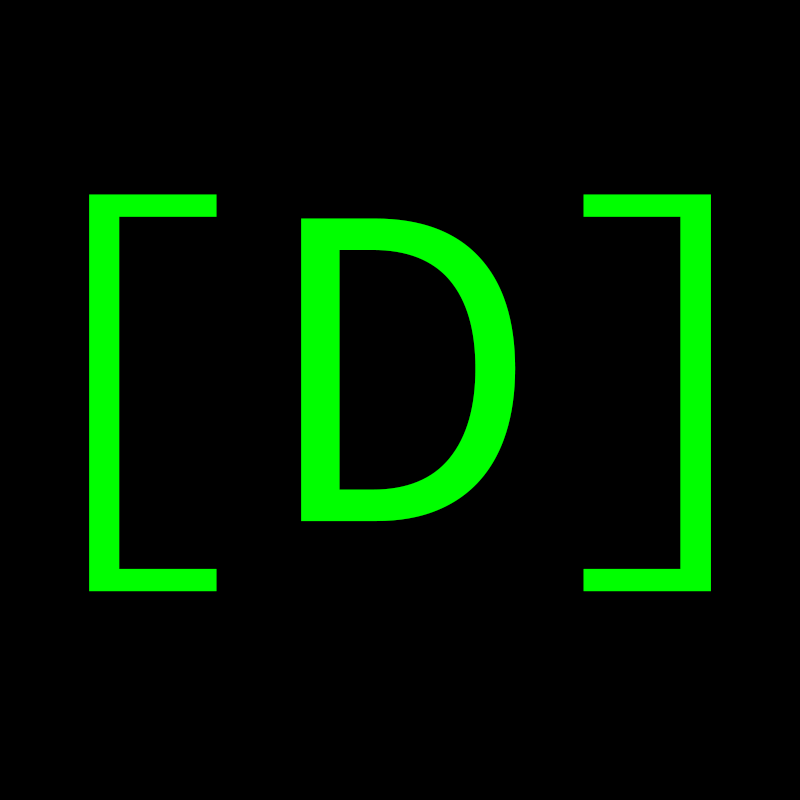
<style>
.page{position:relative;width:800px;height:800px;background:#000000}
.page>*{position:absolute;margin:0}
.t1{font:461px "SourceCodePro-Regular";color:#00ff00}
</style>
<div class="page">
<p class="t1" style="left:89px;top:194px;width:622px;height:398px">[D]</p>
</div>
